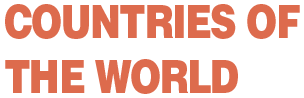
<style>
.page{position:relative;width:304px;height:98px;background:#ffffff}
.page>*{position:absolute;margin:0}
.t1{font:45.7px "HelveticaLTStd-Blk";letter-spacing:-0.04em;color:#dd6b4d;scale:0.81 1}
</style>
<div class="page">
<p class="t1" style="left:5px;top:4px;width:295px;height:90px">COUNTRIES OF<br>THE WORLD</p>
</div>
